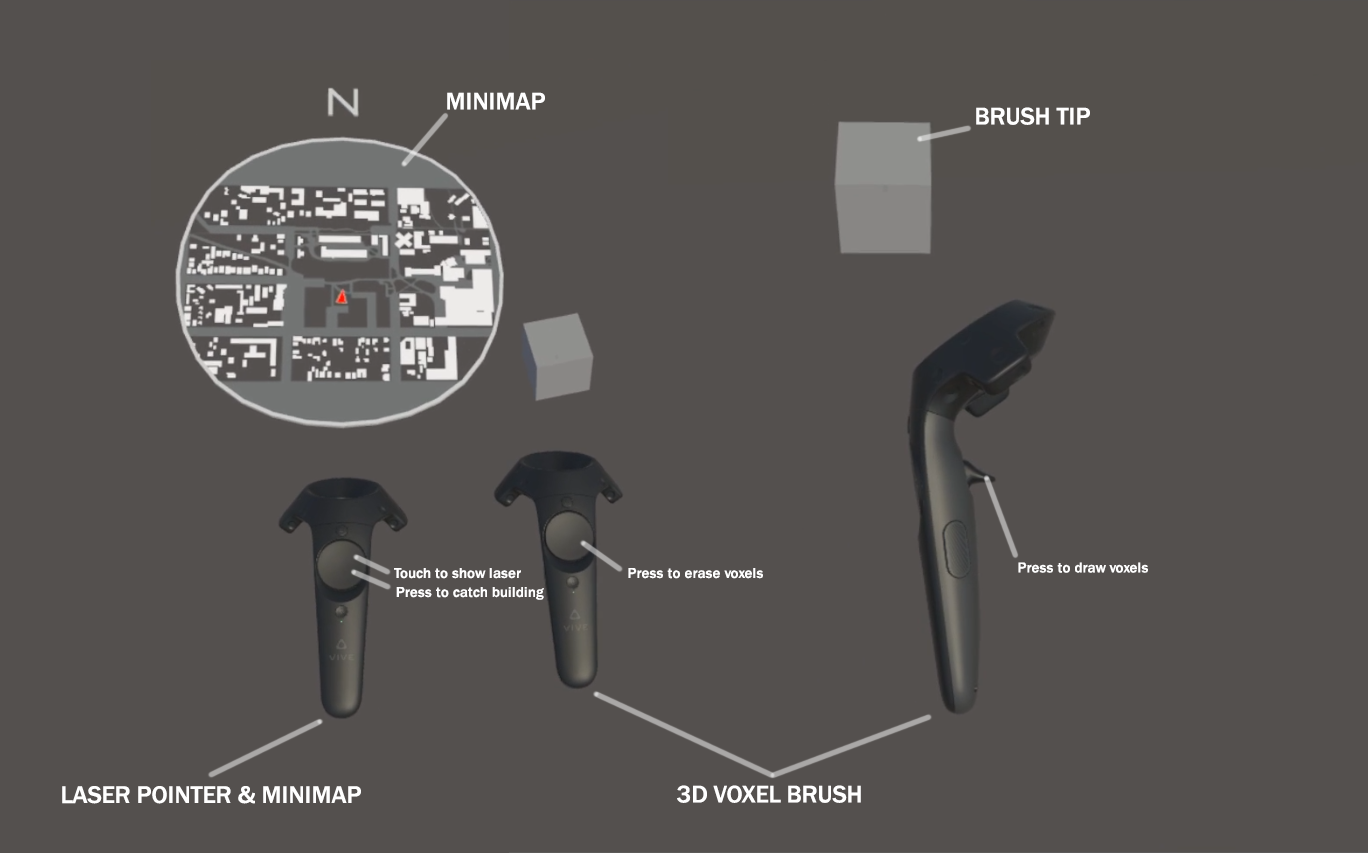
<style>
.page{position:relative;width:1368px;height:853px;background:#54504e}
.page>*{position:absolute;margin:0}
.t1{font:25px "FranklinGothic-Medium";color:#ffffff}
.t2{font:15px "FranklinGothic-Medium";color:#ffffff}
</style>
<div class="page">
<p class="t1" style="left:447px;top:92px;width:98px;height:18px">MINIMAP</p>
<p class="t1" style="left:976px;top:107px;width:114px;height:18px">BRUSH TIP</p>
<p class="t2" style="left:394px;top:568px;width:127px;height:11px">Touch to show laser</p>
<p class="t2" style="left:628px;top:568px;width:135px;height:11px">Press to erase voxels</p>
<p class="t2" style="left:1018px;top:562px;width:130px;height:11px">Press to draw voxels</p>
<p class="t2" style="left:396px;top:587px;width:148px;height:13px">Press to catch building</p>
<p class="t1" style="left:677px;top:785px;width:184px;height:18px">3D VOXEL BRUSH</p>
<p class="t1" style="left:62px;top:786px;width:299px;height:18px">LASER POINTER &amp; MINIMAP</p>
</div>
